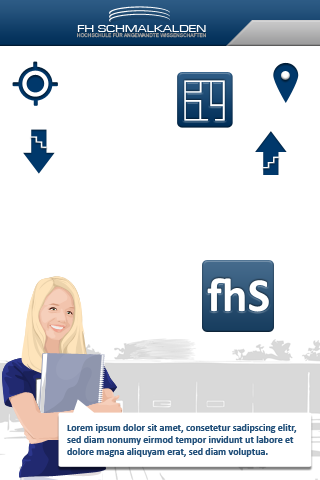
<style>
.page{position:relative;width:320px;height:480px;background:#ffffff}
.page>*{position:absolute;margin:0}
.t1{font:10.8px "EurostileRegular";color:#ffffff;scale:1.38 1}
.t2{font:4.9px "ArialMT";color:#959595}
.t3{font:10px "Calibri-Bold";color:#23517b}
</style>
<div class="page">
<p class="t1" style="left:77px;top:25px;width:129px;height:7px">FH SCHMALKALDEN</p>
<p class="t2" style="left:77px;top:32px;width:129px;height:6px">HOCHSCHULE FÜR ANGEWANDTE WISSENSCHAFTEN</p>
<p class="t3" style="left:67px;top:424px;width:230px;height:33px">Lorem ipsum dolor sit amet, consetetur sadipscing elitr, <br>sed diam nonumy eirmod tempor invidunt ut labore et <br>dolore magna aliquyam erat, sed diam voluptua.</p>
</div>
